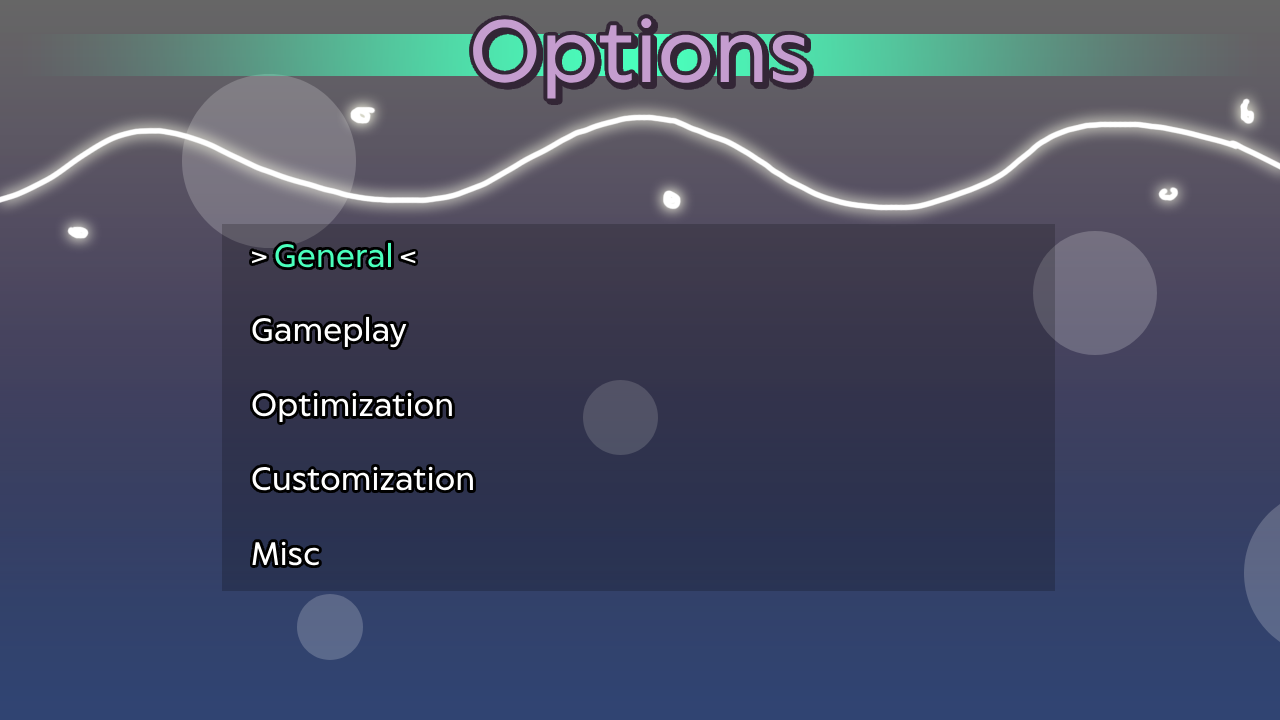
<style>
.page{position:relative;width:1280px;height:720px}
.page>*{position:absolute;margin:0}
.t1{font:85px "CapturaNow-Regular";color:#c59dcf}
.t2{font:85px "CapturaNow-Regular"}
.t3{font:31px "CapturaNow-Regular";color:#ffffff}
.t4{font:31px "CapturaNow-Regular";color:#4affbc}
</style>
<div class="page">
<p class="t1" style="left:473px;top:18px;width:334px;height:81px">Options</p>
<p class="t2" style="left:476px;top:21px;width:334px;height:81px">Options</p>
<p class="t3" style="left:252px;top:242px;width:221px;height:324px">&gt; <span class="t4">General </span>&lt;<br><br>Gameplay<br><br>Optimization<br><br>Customization<br><br>Misc</p>
</div>
